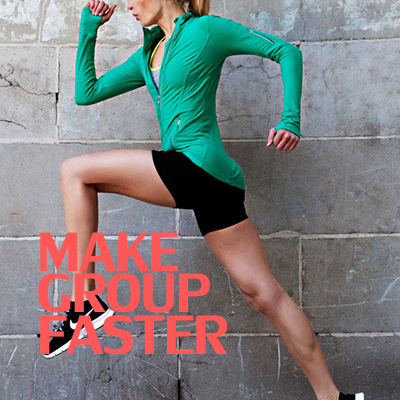
<style>
.page{position:relative;width:400px;height:400px}
.page>*{position:absolute;margin:0}
.t1{font:82px "LilyUPC";color:#ff5656}
</style>
<div class="page">
<p class="t1" style="left:40px;top:232px;width:138px;height:40px">MAKE</p>
<p class="t1" style="left:38px;top:273px;width:172px;height:40px">GROUP</p>
<p class="t1" style="left:40px;top:315px;width:188px;height:40px">FASTER</p>
</div>
